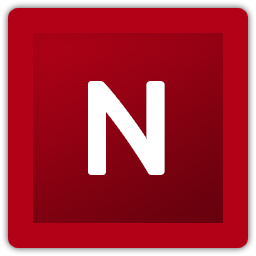
<style>
.page{position:relative;width:256px;height:256px;background:#b30117}
.page>*{position:absolute;margin:0}
.t1{font:127px "Ubuntu-Regular";color:#ffffff}
</style>
<div class="page">
<p class="t1" style="left:91px;top:84px;width:71px;height:88px">N</p>
</div>
